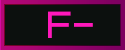
<style>
.page{position:relative;width:125px;height:50px;background:#0c100e}
.page>*{position:absolute;margin:0}
.t1{font:60px "Blackpool-Gothic-NBP";color:#ff18bb}
</style>
<div class="page">
<p class="t1" style="left:48px;top:11px;width:45px;height:27px">F-</p>
</div>
